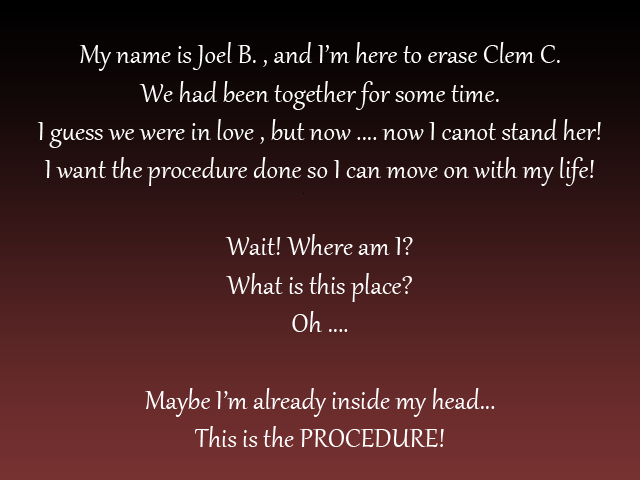
<style>
.page{position:relative;width:640px;height:480px}
.page>*{position:absolute;margin:0}
.t1{font:32px "Gabriola";color:#ffffff}
.t2{font:37.3px "Gabriola";color:#ffffff}
</style>
<div class="page">
<p class="t1" style="left:37px;top:42px;width:564px;height:405px;text-align:center"><span class="t2"><br></span>My name is Joel B. , and I’m here to erase Clem C.<br>We had been together for some time.<br>I guess we were in love , but now .... now I canot stand her!<br>I want the procedure done so I can move on with my life!<br><br>Wait! Where am I?<br>What is this place?<br>Oh ....<br><br>Maybe I’m already inside my head...<br>This is the PROCEDURE!</p>
</div>
